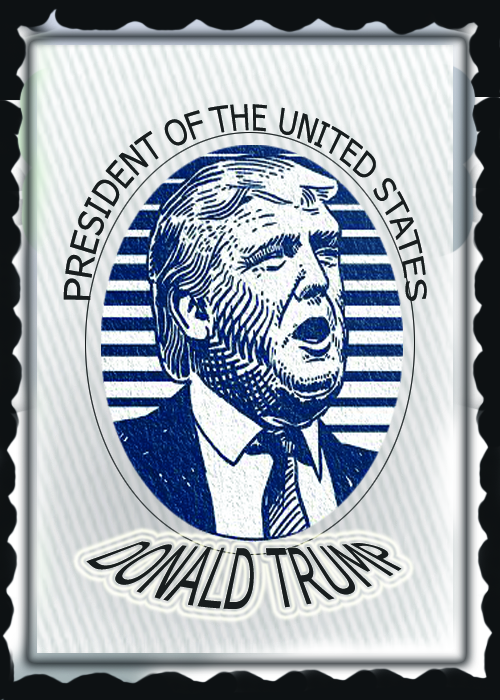
<style>
.page{position:relative;width:500px;height:700px}
.page>*{position:absolute;margin:0}
.t1{font:20.5px "Tahoma";color:#181d1e;scale:0.91 1}
.t2{font:22.8px "Tahoma";color:#181d1e;scale:1.79 1}
</style>
<div class="page">
<p class="t1" style="left:63px;top:104px;width:364px;height:197px;text-align:center">PRESIDENT OF THE UNITED STATES</p>
<p class="t2" style="left:86px;top:541px;width:316px;height:68px;text-align:center">DONALD TRUMP</p>
</div>
